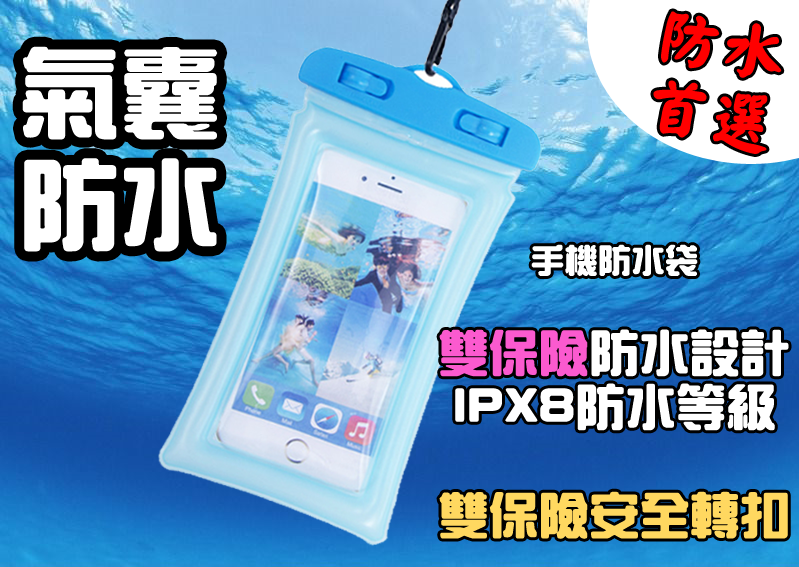
<style>
.page{position:relative;width:799px;height:567px}
.page>*{position:absolute;margin:0}
.t1{font:64px "HanWangYanKai";letter-spacing:0.01em;color:#ff0000;font-weight:bold}
.t2{font:96px "HanWangZonYi";letter-spacing:0.01em;color:#ffffff;font-weight:bold}
.t3{font:32px "HanWangZonYi";letter-spacing:0.01em;color:#ffffff;font-weight:bold}
.t4{font:48px "HanWangZonYi";letter-spacing:0.01em;color:#ffffff;font-weight:bold}
.t5{font:48px "HanWangZonYi";letter-spacing:0.01em;color:#fb5acf;font-weight:bold}
.t6{font:48px "HanWangZonYi";letter-spacing:0.01em;color:#ffd860;font-weight:bold}
</style>
<div class="page">
<p class="t1" style="left:653px;top:11px;width:129px;height:143px;text-align:center;rotate:11deg">防水<br>首選</p>
<p class="t2" style="left:22px;top:46px;width:196px;height:206px;text-align:center">氣囊<br>防水</p>
<p class="t3" style="left:531px;top:244px;width:167px;height:32px">手機防水袋</p>
<p class="t4" style="left:439px;top:329px;width:350px;height:210px;text-align:center"><span class="t5">雙保險</span>防水設計<br>IPX8防水等級<br><br><span class="t6">雙保險安全轉扣</span></p>
</div>
